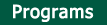
<style>
.page{position:relative;width:107px;height:25px;background:#005941}
.page>*{position:absolute;margin:0}
.t1{font:18px "Tahoma";letter-spacing:0.02em;color:#ffffff;font-weight:bold}
</style>
<div class="page">
<p class="t1" style="left:13px;top:4px;width:81px;height:18px">Programs</p>
</div>
